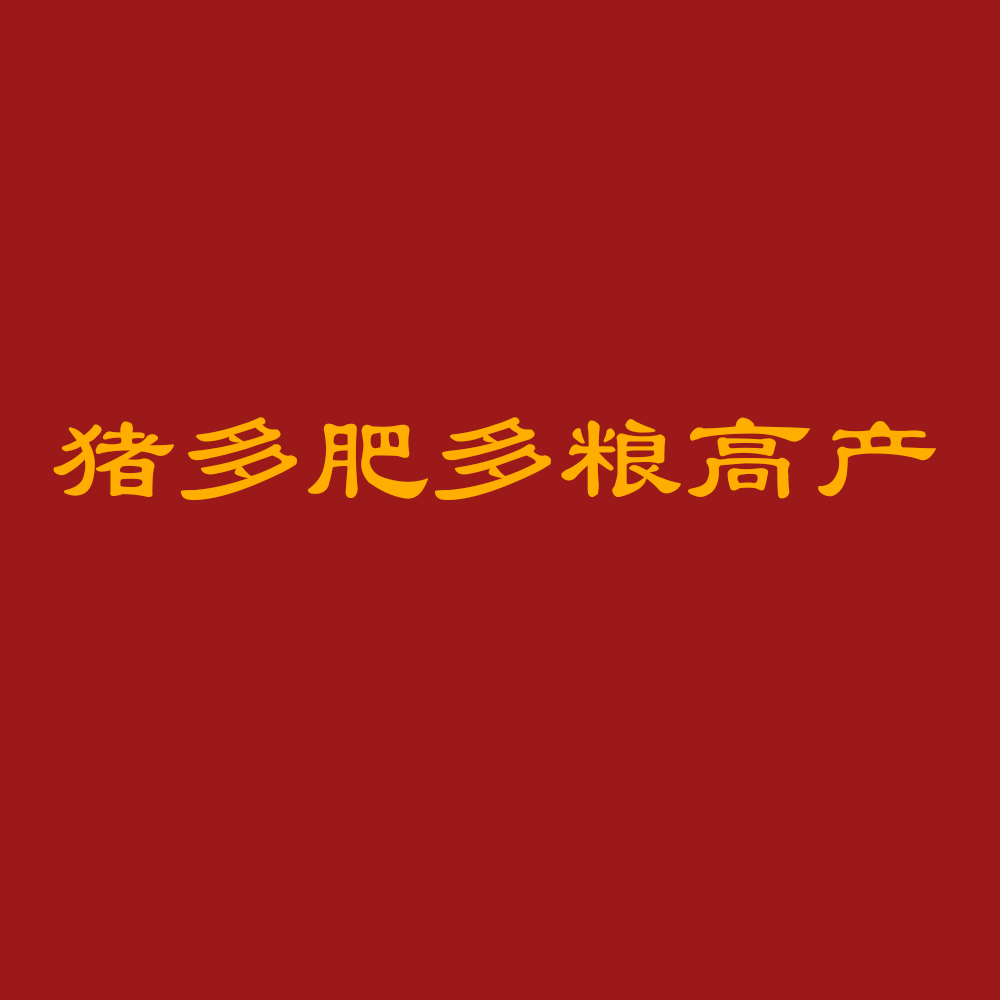
<style>
.page{position:relative;width:1000px;height:1000px;background:#9c1919}
.page>*{position:absolute;margin:0}
.t1{font:127.1px "LiSu";color:#ffae00}
</style>
<div class="page">
<p class="t1" style="left:53px;top:417px;width:884px;height:83px">猪多肥多粮高产</p>
</div>
